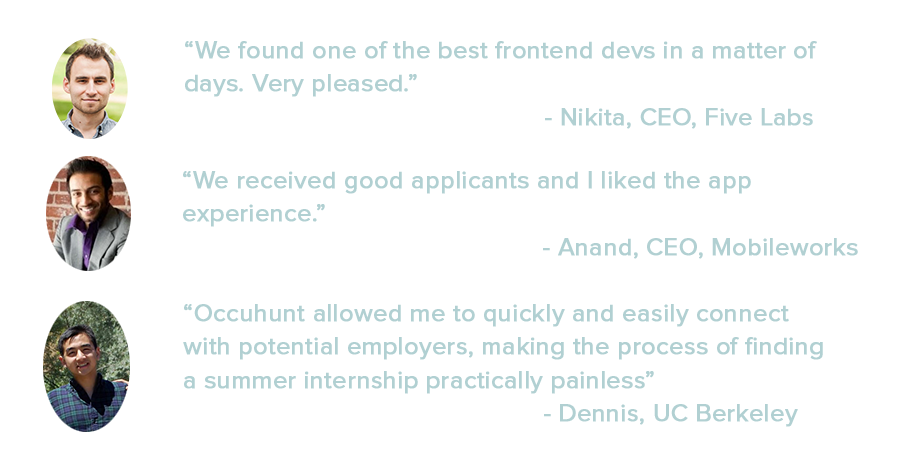
<style>
.page{position:relative;width:900px;height:450px;background:#ffffff}
.page>*{position:absolute;margin:0}
.t1{font:25px/33.3px "ProximaNova-Regular";color:#b1d0d2;font-weight:bold}
</style>
<div class="page">
<p class="t1" style="left:185px;top:41px;width:632px;height:88px">“We found one of the best frontend devs in a matter of <br>days. Very pleased.”<br>          - Nikita, CEO, Five Labs</p>
<p class="t1" style="left:183px;top:171px;width:675px;height:88px">“We received good applicants and I liked the app <br>experience.”<br>          - Anand, CEO, Mobileworks</p>
<p class="t1" style="left:183px;top:304px;width:640px;height:123px">“Occuhunt allowed me to quickly and easily connect <br>with potential employers, making the process of finding <br>a summer internship practically painless”<br>          - Dennis, UC Berkeley</p>
</div>
